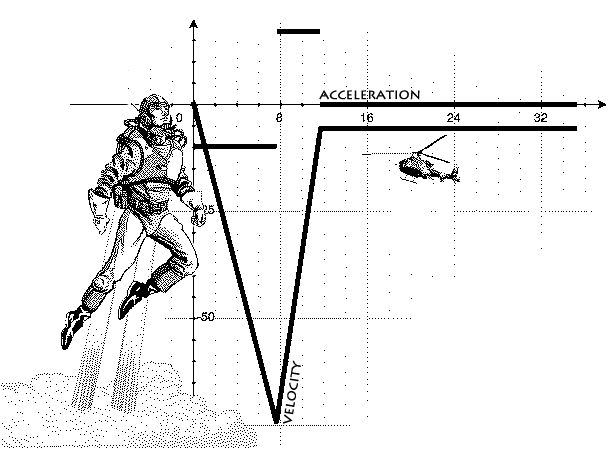
<style>
.page{position:relative;width:610px;height:450px;background:#ffffff}
.page>*{position:absolute;margin:0}
.t1{font:14px "LithosPro-Regular";color:#000000}
</style>
<div class="page">
<p class="t1" style="left:319px;top:90px;width:101px;height:10px">acceleration</p>
<p class="t1" style="left:282px;top:360px;width:19px;height:64px;rotate:-81deg">velocity</p>
</div>
